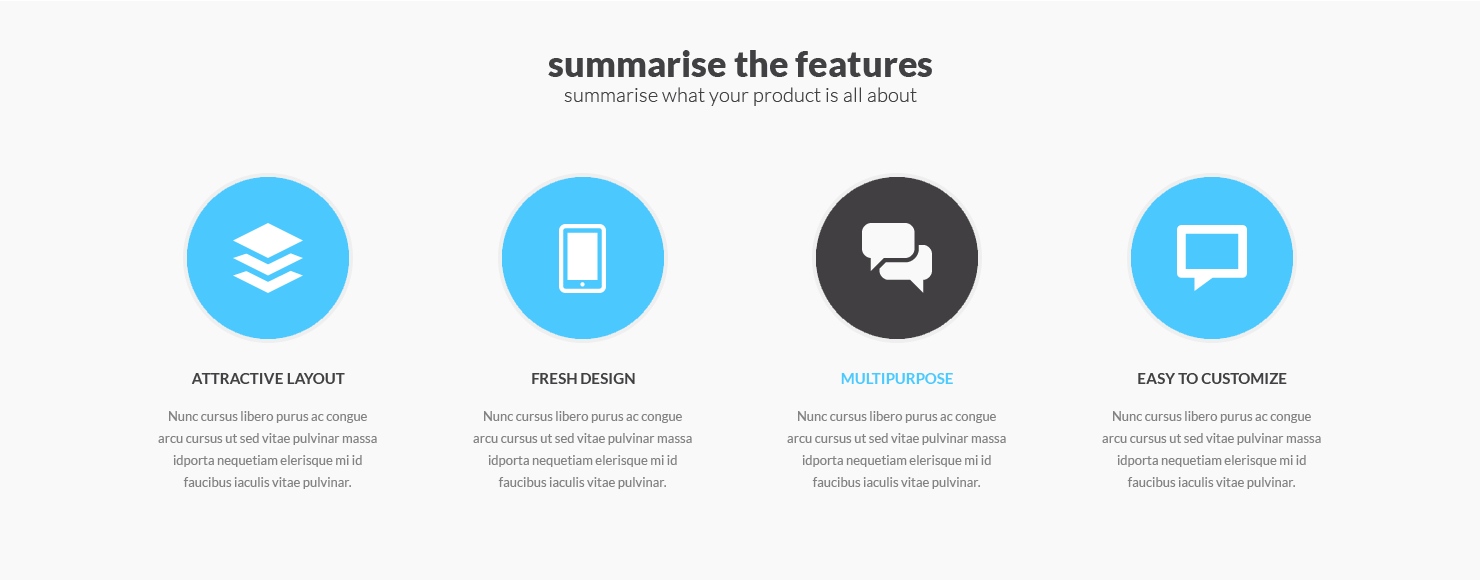
<style>
.page{position:relative;width:1480px;height:580px;background:#f9f9f9}
.page>*{position:absolute;margin:0}
.t1{font:36px "Lato-Black";color:#414042}
.t2{font:20px "Lato-Light";color:#414042}
.t3{font:15px "Lato-Bold";color:#414042;text-transform:uppercase}
.t4{font:15px "Lato-Bold";color:#4bcaff;text-transform:uppercase}
.t5{font:13px/22px "Lato-Regular";color:#838383}
</style>
<div class="page">
<p class="t1" style="left:548px;top:50px;width:384px;height:27px">summarise the features</p>
<p class="t2" style="left:564px;top:87px;width:353px;height:19px">summarise what your product is all about</p>
<p class="t3" style="left:191px;top:373px;width:154px;height:11px">Attractive Layout</p>
<p class="t3" style="left:532px;top:373px;width:103px;height:11px">Fresh Design</p>
<p class="t4" style="left:841px;top:373px;width:112px;height:11px">multipurpose</p>
<p class="t3" style="left:1138px;top:373px;width:149px;height:11px">Easy to customize</p>
<p class="t5" style="left:158px;top:411px;width:219px;height:78px;text-align:center">Nunc cursus libero purus ac congue arcu cursus ut sed vitae pulvinar massa idporta nequetiam elerisque mi id faucibus iaculis vitae pulvinar.</p>
<p class="t5" style="left:473px;top:411px;width:219px;height:78px;text-align:center">Nunc cursus libero purus ac congue arcu cursus ut sed vitae pulvinar massa idporta nequetiam elerisque mi id faucibus iaculis vitae pulvinar.</p>
<p class="t5" style="left:787px;top:411px;width:219px;height:78px;text-align:center">Nunc cursus libero purus ac congue arcu cursus ut sed vitae pulvinar massa idporta nequetiam elerisque mi id faucibus iaculis vitae pulvinar.</p>
<p class="t5" style="left:1102px;top:411px;width:219px;height:78px;text-align:center">Nunc cursus libero purus ac congue arcu cursus ut sed vitae pulvinar massa idporta nequetiam elerisque mi id faucibus iaculis vitae pulvinar.</p>
</div>
